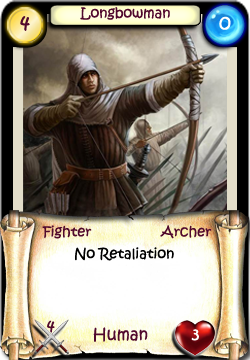
<style>
.page{position:relative;width:250px;height:360px}
.page>*{position:absolute;margin:0}
.t1{font:20px "KristenITC-Regular";color:#51092d}
.t2{font:14px "KristenITC-Regular";color:#51092d}
.t3{font:20px "KristenITC-Regular";color:#ffffff}
.t4{font:14px "KristenITC-Regular";color:#000000}
.t5{font:16px "KristenITC-Regular";color:#51092d}
.t6{font:16px "KristenITC-Regular";color:#fefefe}
</style>
<div class="page">
<p class="t1" style="left:20px;top:16px;width:10px;height:15px">4</p>
<p class="t2" style="left:80px;top:7px;width:90px;height:13px">Longbowman</p>
<p class="t3" style="left:219px;top:16px;width:12px;height:14px">0</p>
<p class="t2" style="left:42px;top:225px;width:50px;height:14px">Fighter</p>
<p class="t2" style="left:160px;top:225px;width:52px;height:14px">Archer</p>
<p class="t4" style="left:75px;top:247px;width:99px;height:14px">No Retaliation</p>
<p class="t5" style="left:47px;top:320px;width:8px;height:13px">4</p>
<p class="t5" style="left:93px;top:327px;width:55px;height:15px">Human</p>
<p class="t6" style="left:191px;top:329px;width:8px;height:12px">3</p>
</div>
